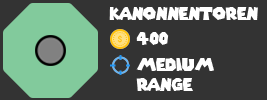
<style>
.page{position:relative;width:267px;height:100px;background:#333333}
.page>*{position:absolute;margin:0}
.t1{font:16.7px "SuperMarioGalaxy";color:#ffffff}
</style>
<div class="page">
<p class="t1" style="left:109px;top:7px;width:149px;height:13px">kanonnentoren</p>
<p class="t1" style="left:136px;top:32px;width:33px;height:13px">400</p>
<p class="t1" style="left:136px;top:58px;width:78px;height:33px">medium<br>range</p>
</div>
